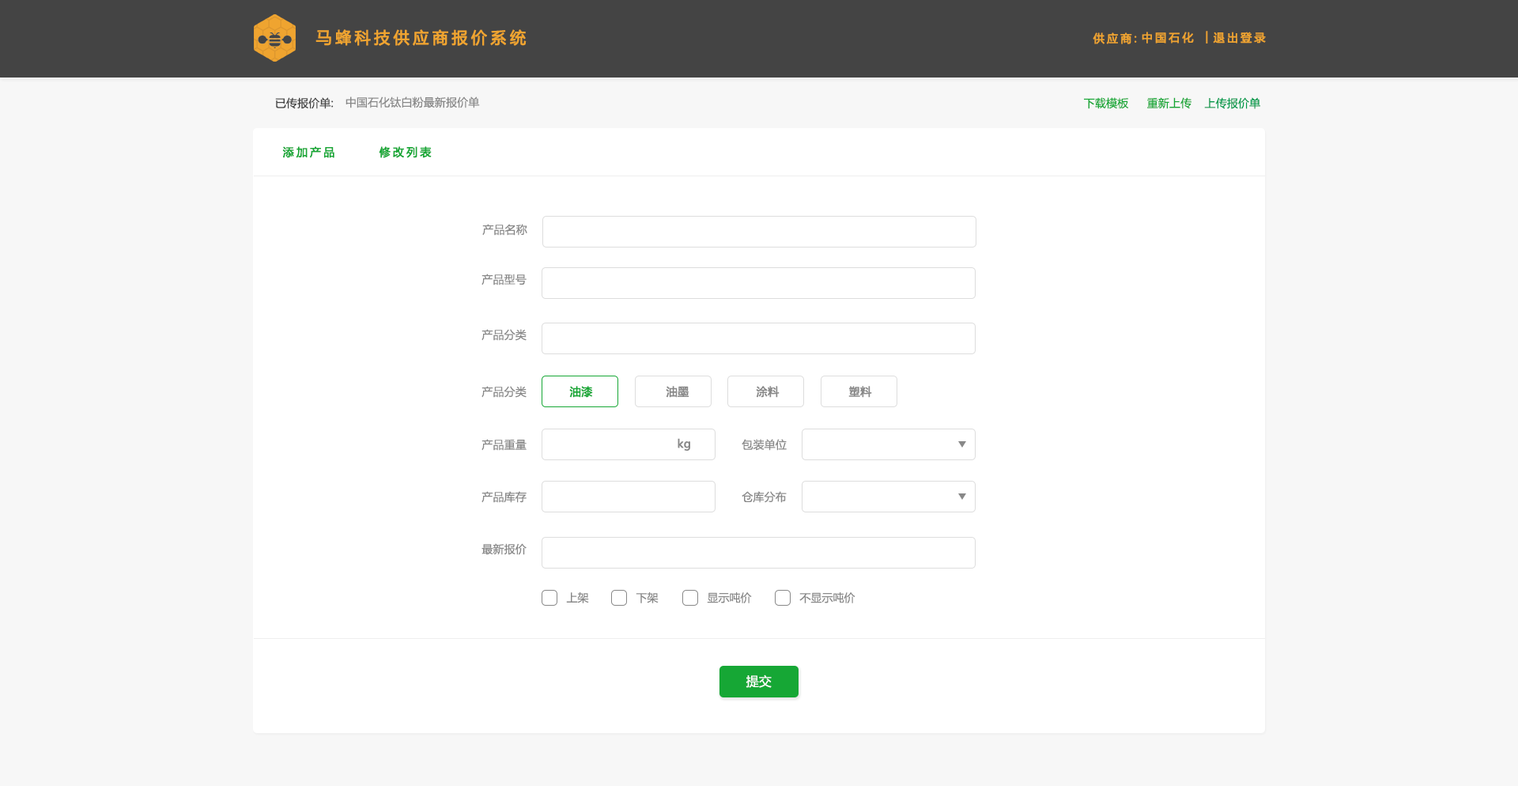
<style>
.page{position:relative;width:1518px;height:786px;background:#ffffff}
.page>*{position:absolute;margin:0}
.t1{font:15.8px "MicrosoftYaHei";letter-spacing:0.2em;color:#efa430;font-weight:bold}
.t2{font:11.1px "MicrosoftYaHei";letter-spacing:0.2em;color:#efa430;font-weight:bold}
.t3{font:11.1px "MicrosoftYaHei";letter-spacing:0.01em;color:#444444}
.t4{font:11.1px "MicrosoftYaHei";letter-spacing:0.01em;color:#888888}
.t5{font:11.1px "MicrosoftYaHei";letter-spacing:0.01em;color:#16a735}
.t6{font:11.1px "MicrosoftYaHei";letter-spacing:0.01em;color:#009b4c}
.t7{font:11.1px "MicrosoftYaHei";letter-spacing:0.2em;color:#16a735;font-weight:bold}
.t8{font:11.1px "MicrosoftYaHei";letter-spacing:0.01em;color:#16a735;font-weight:bold}
.t9{font:11.1px "MicrosoftYaHei";letter-spacing:0.01em;color:#888888;font-weight:bold}
.t10{font:11.1px "MicrosoftYaHei";color:#888888}
.t11{font:12.6px "MicrosoftYaHei";letter-spacing:0.01em;color:#ffffff}
</style>
<div class="page">
<p class="t1" style="left:315px;top:29px;width:211px;height:17px">马蜂科技供应商报价系统</p>
<p class="t2" style="left:1092px;top:32px;width:45px;height:12px">供应商:</p>
<p class="t2" style="left:1141px;top:32px;width:53px;height:11px">中国石化</p>
<p class="t2" style="left:1205px;top:31px;width:3px;height:12px">|</p>
<p class="t2" style="left:1213px;top:32px;width:53px;height:11px">退出登录</p>
<p class="t3" style="left:275px;top:97px;width:59px;height:12px">已传报价单:</p>
<p class="t4" style="left:345px;top:96px;width:135px;height:12px">中国石化钛白粉最新报价单</p>
<p class="t5" style="left:1084px;top:97px;width:45px;height:12px">下载模板</p>
<p class="t5" style="left:1147px;top:97px;width:44px;height:12px">重新上传</p>
<p class="t6" style="left:1204px;top:97px;width:56px;height:12px">上传报价单</p>
<p class="t7" style="left:282px;top:146px;width:52px;height:12px">添加产品</p>
<p class="t7" style="left:379px;top:146px;width:53px;height:12px">修改列表</p>
<p class="t4" style="left:482px;top:224px;width:45px;height:12px">产品名称</p>
<p class="t4" style="left:481px;top:273px;width:45px;height:12px">产品型号</p>
<p class="t4" style="left:481px;top:329px;width:45px;height:12px">产品分类</p>
<p class="t4" style="left:481px;top:386px;width:45px;height:12px">产品分类</p>
<p class="t8" style="left:569px;top:386px;width:24px;height:12px">油漆</p>
<p class="t9" style="left:666px;top:386px;width:23px;height:12px">油墨</p>
<p class="t9" style="left:756px;top:386px;width:23px;height:12px">涂料</p>
<p class="t9" style="left:848px;top:386px;width:24px;height:12px">塑料</p>
<p class="t9" style="left:677px;top:438px;width:13px;height:13px">kg</p>
<p class="t4" style="left:481px;top:439px;width:45px;height:12px">产品重量</p>
<p class="t4" style="left:741px;top:439px;width:45px;height:12px">包装单位</p>
<p class="t4" style="left:481px;top:491px;width:45px;height:12px">产品库存</p>
<p class="t4" style="left:741px;top:491px;width:45px;height:12px">仓库分布</p>
<p class="t4" style="left:481px;top:543px;width:45px;height:12px">最新报价</p>
<p class="t10" style="left:566px;top:592px;width:23px;height:11px">上架</p>
<p class="t10" style="left:636px;top:592px;width:22px;height:11px">下架</p>
<p class="t10" style="left:707px;top:592px;width:45px;height:11px">显示吨价</p>
<p class="t10" style="left:799px;top:592px;width:56px;height:11px">不显示吨价</p>
<p class="t11" style="left:745px;top:674px;width:26px;height:14px">提交</p>
</div>
